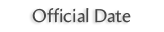
<style>
.page{position:relative;width:164px;height:32px;background:#ffffff}
.page>*{position:absolute;margin:0}
.t1{font:18.7px "Amira-Roman";color:#474747}
</style>
<div class="page">
<p class="t1" style="left:32px;top:8px;width:99px;height:15px">Official Date</p>
</div>
